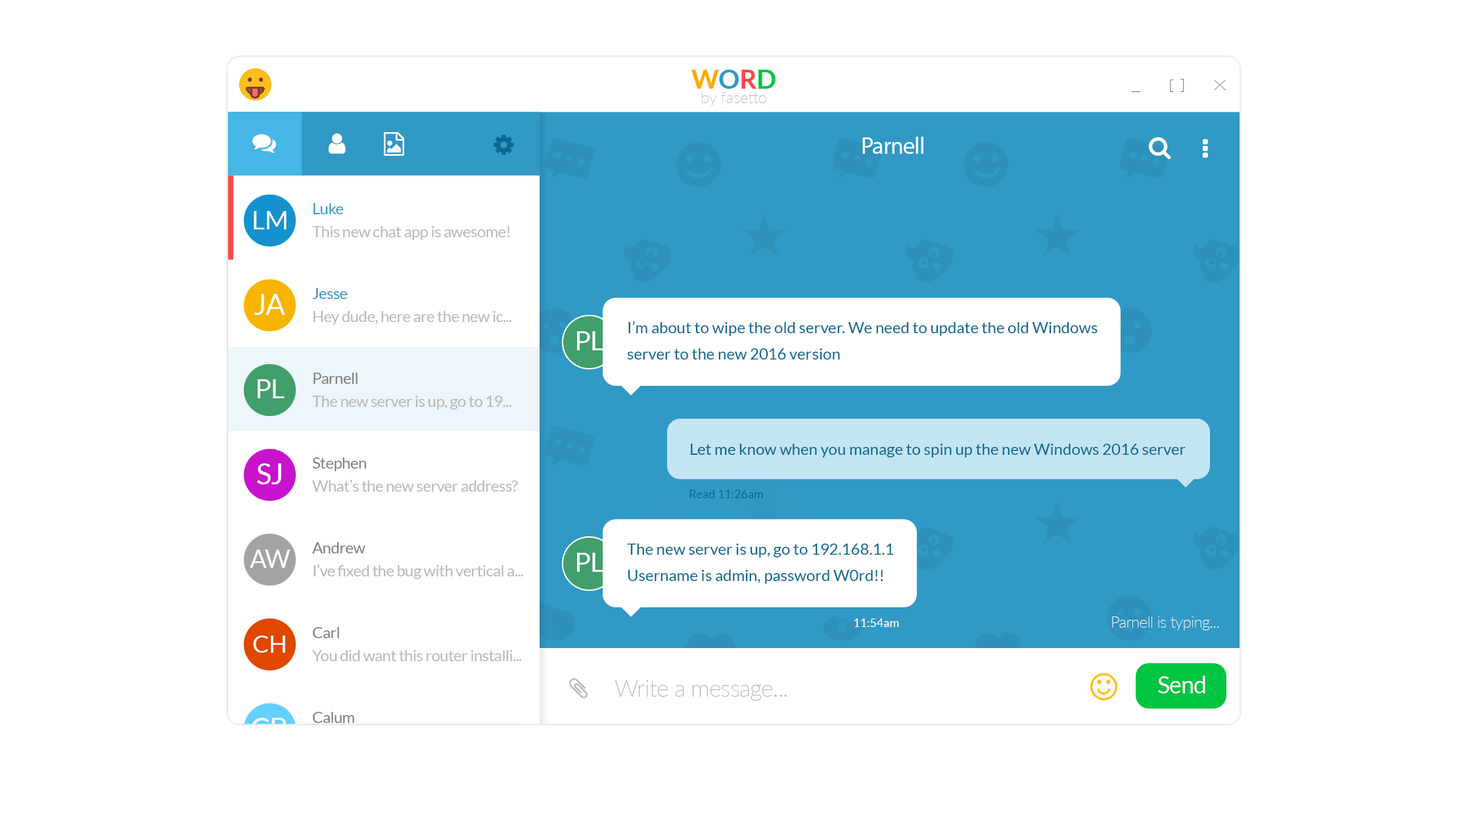
<style>
.page{position:relative;width:1463px;height:815px;background:#ffffff}
.page>*{position:absolute;margin:0}
.t1{font:23.7px "MyriadPro-Regular";letter-spacing:-0.025em;color:#ffffff}
.t2{font:15.8px "Lato-Regular";letter-spacing:-0.025em;color:#3099c5}
.t3{font:25.8px "Lato-Regular";letter-spacing:-0.025em;color:#ffffff}
.t4{font:15.8px "Lato-Regular";letter-spacing:-0.025em;color:#b9b9b9}
.t5{font:28.7px "Lato-Regular";letter-spacing:-0.025em;color:#ffffff}
.t6{font:15.8px/26.3px "Lato-Regular";color:#0c6991}
.t7{font:27.2px "Lato-Regular";letter-spacing:-0.025em;color:#ffffff}
.t8{font:15.8px "Lato-Regular";letter-spacing:-0.025em;color:#808080}
.t9{font:15.8px "Lato-Regular";color:#0c6991}
.t10{font:15.8px "Lato-Regular";letter-spacing:-0.025em;color:#7f7f7f}
.t11{font:11.8px "Lato-Regular";color:#0c6991}
.t12{font:24.8px "Lato-Regular";letter-spacing:-0.025em;color:#ffffff}
.t13{font:15.8px "Lato-Thin";letter-spacing:-0.025em;color:#ffffff}
.t14{font:11.8px "Lato-Regular";color:#ffffff}
.t15{font:24.1px "Lato-Regular";letter-spacing:-0.025em;color:#ffffff}
.t16{font:23.7px "Lato-Regular";letter-spacing:-0.025em;color:#ffffff}
.t17{font:23.7px "Lato-Thin";letter-spacing:-0.025em;color:#afafaf}
</style>
<div class="page">
<p class="t1" style="left:862px;top:137px;width:61px;height:17px">Parnell</p>
<p class="t2" style="left:314px;top:203px;width:30px;height:11px">Luke</p>
<p class="t3" style="left:254px;top:211px;width:33px;height:18px">LM</p>
<p class="t4" style="left:312px;top:226px;width:198px;height:14px">This new chat app is awesome!</p>
<p class="t5" style="left:254px;top:294px;width:31px;height:21px">JA</p>
<p class="t2" style="left:312px;top:288px;width:36px;height:11px">Jesse</p>
<p class="t4" style="left:314px;top:311px;width:198px;height:14px">Hey dude, here are the new ic...</p>
<p class="t6" style="left:627px;top:321px;width:471px;height:39px">I’m about to wipe the old server. We need to update the old Windows<br>server to the new 2016 version</p>
<p class="t7" style="left:577px;top:331px;width:27px;height:19px">PL</p>
<p class="t8" style="left:314px;top:373px;width:44px;height:11px">Parnell</p>
<p class="t7" style="left:258px;top:379px;width:27px;height:19px">PL</p>
<p class="t4" style="left:312px;top:396px;width:199px;height:13px">The new server is up, go to 19...</p>
<p class="t9" style="left:691px;top:444px;width:495px;height:13px">Let me know when you manage to spin up the new Windows 2016 server</p>
<p class="t10" style="left:312px;top:457px;width:54px;height:14px">Stephen</p>
<p class="t5" style="left:257px;top:463px;width:24px;height:21px">SJ</p>
<p class="t4" style="left:312px;top:479px;width:206px;height:13px">What’s the new server address?</p>
<p class="t11" style="left:689px;top:490px;width:74px;height:8px">Read 11:26am</p>
<p class="t10" style="left:312px;top:542px;width:53px;height:11px">Andrew</p>
<p class="t6" style="left:627px;top:544px;width:267px;height:40px">The new server is up, go to 192.168.1.1<br>Username is admin, password W0rd!!</p>
<p class="t12" style="left:250px;top:549px;width:41px;height:19px">AW</p>
<p class="t7" style="left:577px;top:553px;width:27px;height:19px">PL</p>
<p class="t4" style="left:314px;top:564px;width:209px;height:15px">I’ve fixed the bug with vertical a...</p>
<p class="t13" style="left:1112px;top:617px;width:107px;height:13px">Parnell is typing...</p>
<p class="t10" style="left:313px;top:627px;width:26px;height:11px">Carl</p>
<p class="t14" style="left:854px;top:618px;width:45px;height:9px">11:54am</p>
<p class="t15" style="left:253px;top:636px;width:32px;height:17px">CH</p>
<p class="t4" style="left:312px;top:650px;width:210px;height:11px">You did want this router installi...</p>
<p class="t16" style="left:1158px;top:676px;width:47px;height:17px">Send</p>
<p class="t17" style="left:615px;top:680px;width:172px;height:21px">Write a message...</p>
<p class="t10" style="left:313px;top:712px;width:41px;height:11px">Calum</p>
<p class="t5" style="left:252px;top:718px;width:35px;height:21px">CB</p>
</div>
